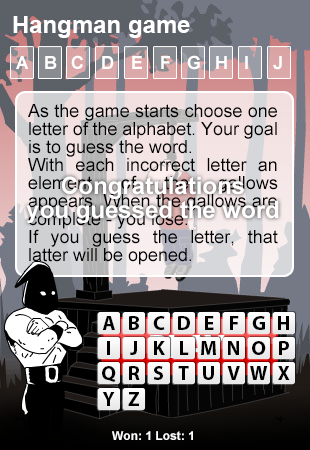
<style>
.page{position:relative;width:310px;height:450px}
.page>*{position:absolute;margin:0}
.t1{font:24px "Arial-BoldMT";color:#ffffff}
.t2{font:18px "Arial-BoldMT";color:#ffffff}
.t3{font:18px/18px "ArialMT";color:#010101}
.t4{font:24px/24px "Arial-BoldMT";color:#ffffff}
.t5{font:20px "MyriadPro-Bold";color:#000000}
.t6{font:12px "Arial-BoldMT";color:#ffffff}
</style>
<div class="page">
<p class="t1" style="left:13px;top:16px;width:177px;height:22px">Hangman game</p>
<p class="t2" style="left:16px;top:56px;width:13px;height:13px">A</p>
<p class="t2" style="left:45px;top:56px;width:12px;height:13px">B</p>
<p class="t2" style="left:71px;top:55px;width:12px;height:14px">C</p>
<p class="t2" style="left:102px;top:56px;width:12px;height:13px">D</p>
<p class="t2" style="left:132px;top:56px;width:10px;height:13px">E</p>
<p class="t2" style="left:161px;top:56px;width:9px;height:13px">F</p>
<p class="t2" style="left:187px;top:55px;width:13px;height:15px">G</p>
<p class="t2" style="left:216px;top:56px;width:11px;height:13px">H</p>
<p class="t2" style="left:245px;top:56px;width:3px;height:13px">I</p>
<p class="t2" style="left:273px;top:56px;width:9px;height:14px">J</p>
<p class="t3" style="left:28px;top:104px;width:250px;height:161px;text-align:justify">As the game starts choose one letter of the alphabet. Your goal is to guess the word.<br>With each incorrect letter an element of the gallows appears. When the gallows are complete - you lose.<br>If you guess the letter, that latter will be opened.</p>
<p class="t4" style="left:26px;top:176px;width:253px;height:47px;text-align:center">Congratulations<br>you guessed the word</p>
<p class="t5" style="left:102px;top:316px;width:13px;height:14px">A</p>
<p class="t5" style="left:129px;top:316px;width:10px;height:14px">B</p>
<p class="t5" style="left:153px;top:316px;width:12px;height:14px">C</p>
<p class="t5" style="left:178px;top:316px;width:12px;height:14px">D</p>
<p class="t5" style="left:205px;top:316px;width:9px;height:14px">E</p>
<p class="t5" style="left:230px;top:316px;width:9px;height:14px">F</p>
<p class="t5" style="left:252px;top:316px;width:13px;height:14px">G</p>
<p class="t5" style="left:278px;top:316px;width:11px;height:14px">H</p>
<p class="t5" style="left:130px;top:341px;width:7px;height:14px">J</p>
<p class="t5" style="left:154px;top:341px;width:11px;height:14px">K</p>
<p class="t5" style="left:180px;top:341px;width:9px;height:14px">L</p>
<p class="t5" style="left:201px;top:341px;width:15px;height:14px">M</p>
<p class="t5" style="left:228px;top:341px;width:11px;height:14px">N</p>
<p class="t5" style="left:252px;top:341px;width:14px;height:14px">O</p>
<p class="t5" style="left:279px;top:341px;width:10px;height:14px">P</p>
<p class="t5" style="left:102px;top:366px;width:14px;height:16px">Q</p>
<p class="t5" style="left:129px;top:366px;width:11px;height:14px">R</p>
<p class="t5" style="left:153px;top:366px;width:10px;height:14px">S</p>
<p class="t5" style="left:178px;top:366px;width:11px;height:14px">T</p>
<p class="t5" style="left:203px;top:366px;width:11px;height:14px">U</p>
<p class="t5" style="left:227px;top:366px;width:13px;height:14px">V</p>
<p class="t5" style="left:250px;top:366px;width:18px;height:14px">W</p>
<p class="t5" style="left:278px;top:366px;width:12px;height:14px">X</p>
<p class="t5" style="left:102px;top:392px;width:13px;height:14px">Y</p>
<p class="t5" style="left:128px;top:392px;width:11px;height:14px">Z</p>
<p class="t6" style="left:112px;top:431px;width:81px;height:9px">Won: 1 Lost: 1</p>
</div>
